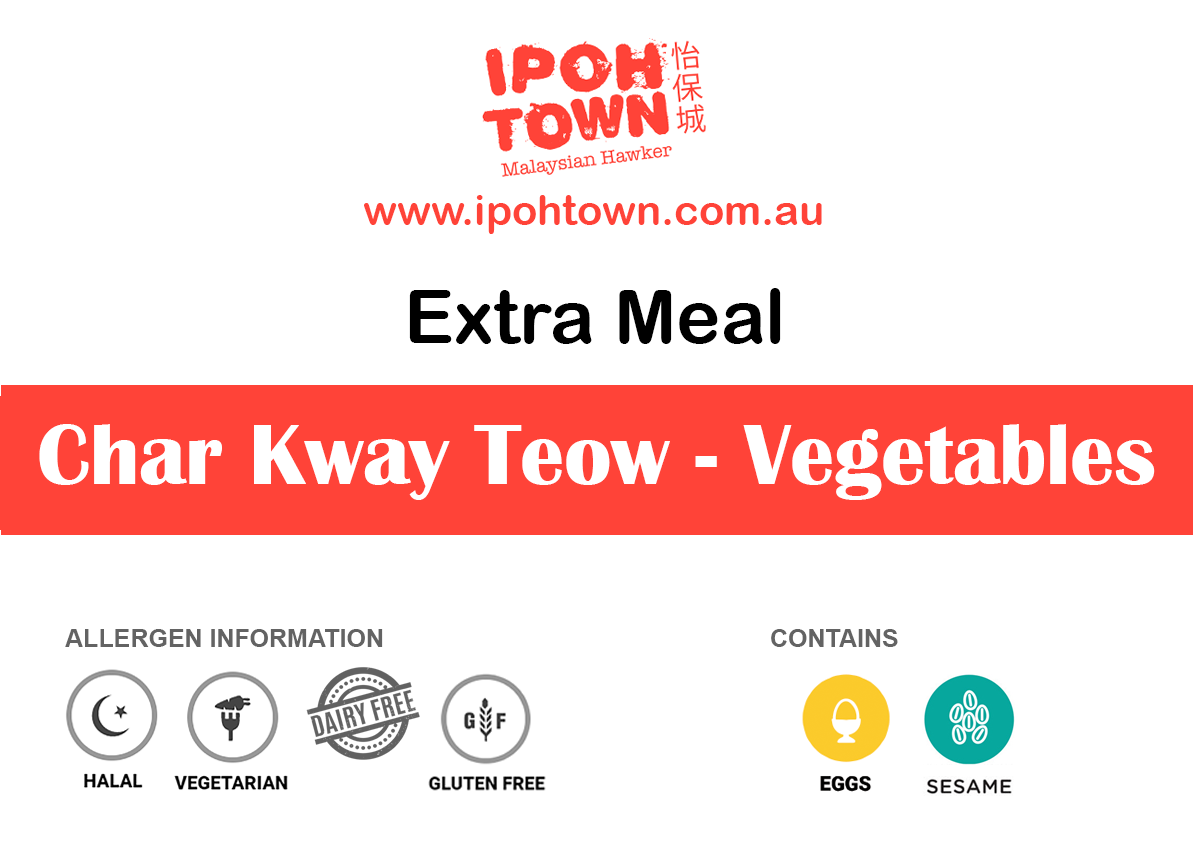
<style>
.page{position:relative;width:1193px;height:850px;background:#ffffff}
.page>*{position:absolute;margin:0}
.t1{font:41.7px "ArialRoundedMTBold";color:#ff4338}
.t2{font:75px "ArialRoundedMTBold";color:#000000}
.t3{font:87.5px "BritannicBold";color:#ffffff}
.t4{font:25px "Arial-BoldMT";color:#636363}
</style>
<div class="page">
<p class="t1" style="left:364px;top:195px;width:458px;height:39px">www.ipohtown.com.au</p>
<p class="t2" style="left:409px;top:288px;width:372px;height:56px">Extra Meal</p>
<p class="t3" style="left:39px;top:424px;width:1116px;height:76px">Char Kway Teow - Vegetables</p>
<p class="t4" style="left:65px;top:629px;width:318px;height:18px">ALLERGEN INFORMATION</p>
<p class="t4" style="left:771px;top:629px;width:127px;height:18px">CONTAINS</p>
</div>
